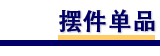
<style>
.page{position:relative;width:160px;height:56px;background:#ffffff}
.page>*{position:absolute;margin:0}
.t1{font:24px "AdobeHeitiStd-Regular";color:#000066;font-weight:bold}
</style>
<div class="page">
<p class="t1" style="left:59px;top:9px;width:96px;height:24px">摆件单品</p>
</div>
